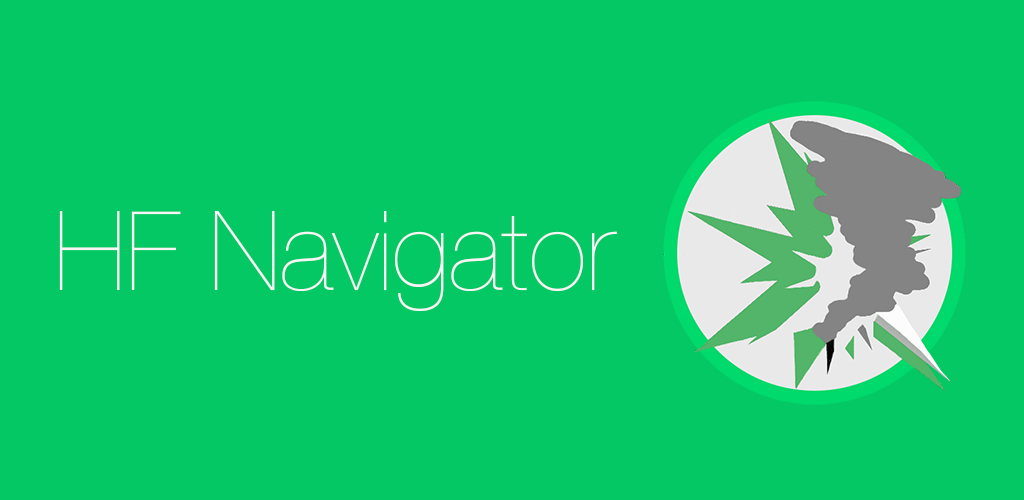
<style>
.page{position:relative;width:1024px;height:500px;background:#03c864}
.page>*{position:absolute;margin:0}
.t1{font:110px "HelveticaNeue-UltraLight";color:#f6f6f6}
</style>
<div class="page">
<p class="t1" style="left:59px;top:211px;width:558px;height:100px">HF Navigator</p>
</div>
